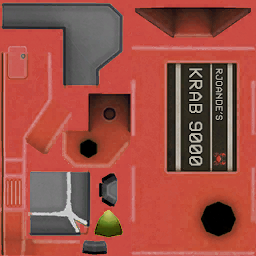
<style>
.page{position:relative;width:256px;height:256px}
.page>*{position:absolute;margin:0}
.t1{font:19.8px "PFVideotext-Regular";letter-spacing:-0.02em;color:#c0bbac}
.t2{font:10.4px "PFVideotext-Regular";letter-spacing:-0.02em;color:#c0bbac}
</style>
<div class="page">
<p class="t1" style="left:189px;top:68px;width:14px;height:98px;rotate:90deg">KRAB 9000</p>
<p class="t2" style="left:215px;top:68px;width:8px;height:52px;rotate:90deg">RJOANDE’S</p>
</div>
